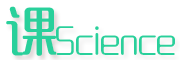
<style>
.page{position:relative;width:180px;height:60px;background:#ffffff}
.page>*{position:absolute;margin:0}
.t1{font:48.9px "MFYaYuan_Noncommercial-Regular";color:#29d09b;font-weight:bold}
.t2{font:36px "MFYaYuan_Noncommercial-Regular";color:#29d09b}
</style>
<div class="page">
<p class="t1" style="left:6px;top:6px;width:51px;height:50px">课</p>
<p class="t2" style="left:56px;top:26px;width:119px;height:29px">Science</p>
</div>
